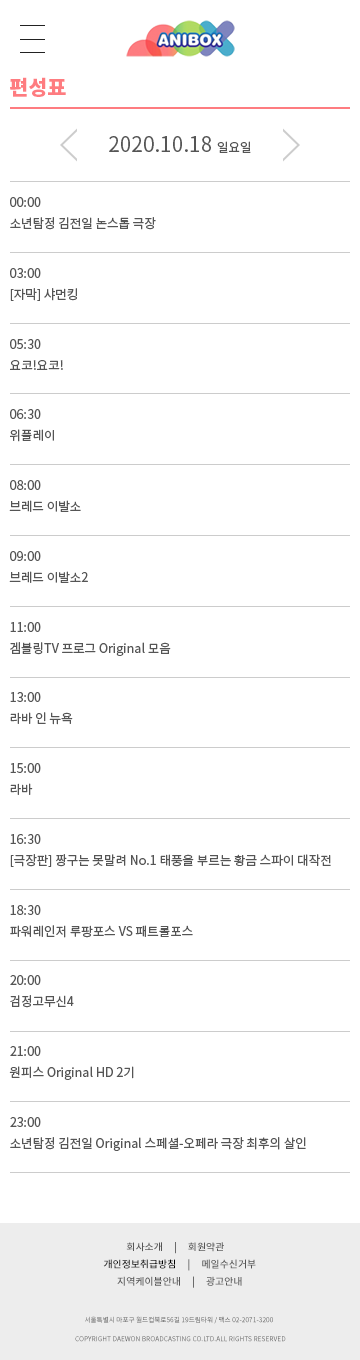
<style>
.page{position:relative;width:360px;height:1360px;background:#ffffff}
.page>*{position:absolute;margin:0}
.t1{font:20.8px "NotoSansKR-Black";color:#fe7c80}
.t2{font:20.8px "NotoSansKR-Regular";color:#555555}
.t3{font:12.5px "NotoSansKR-Regular";color:#555555}
.t4{font:9.9px/17.2px "NotoSansKR-Medium";color:#555555}
.t5{font:9.9px/17.2px "NotoSansKR-Medium";color:#222222}
.t6{font:9.9px/17.2px "NotoSansKR-Medium";color:#000000}
.t7{font:6.6px/19px "NotoSansKR-Regular"}
</style>
<div class="page">
<p class="t1" style="left:10px;top:77px;width:56px;height:20px">편성표</p>
<p class="t2" style="left:109px;top:136px;width:142px;height:17px">2020.10.18 <span class="t3">일요일</span></p>
<p class="t3" style="left:10px;top:197px;width:31px;height:10px">00:00</p>
<p class="t3" style="left:10px;top:217px;width:146px;height:13px">소년탐정 김전일 논스톱 극장</p>
<p class="t3" style="left:10px;top:268px;width:31px;height:10px">03:00</p>
<p class="t3" style="left:10px;top:288px;width:67px;height:13px">[자막] 샤먼킹</p>
<p class="t3" style="left:10px;top:339px;width:31px;height:10px">05:30</p>
<p class="t3" style="left:10px;top:360px;width:53px;height:10px">요코!요코!</p>
<p class="t3" style="left:10px;top:409px;width:31px;height:10px">06:30</p>
<p class="t3" style="left:10px;top:429px;width:44px;height:13px">위플레이</p>
<p class="t3" style="left:10px;top:480px;width:31px;height:10px">08:00</p>
<p class="t3" style="left:9px;top:500px;width:72px;height:12px">브레드 이발소</p>
<p class="t3" style="left:10px;top:551px;width:31px;height:10px">09:00</p>
<p class="t3" style="left:9px;top:571px;width:79px;height:12px">브레드 이발소2</p>
<p class="t3" style="left:10px;top:622px;width:31px;height:10px">11:00</p>
<p class="t3" style="left:10px;top:642px;width:161px;height:14px">겜블링TV 프로그 Original 모음</p>
<p class="t3" style="left:10px;top:692px;width:31px;height:10px">13:00</p>
<p class="t3" style="left:10px;top:712px;width:63px;height:13px">라바 인 뉴욕</p>
<p class="t3" style="left:10px;top:763px;width:31px;height:10px">15:00</p>
<p class="t3" style="left:10px;top:783px;width:23px;height:12px">라바</p>
<p class="t3" style="left:10px;top:834px;width:31px;height:10px">16:30</p>
<p class="t3" style="left:10px;top:854px;width:321px;height:13px">[극장판] 짱구는 못말려 No.1 태풍을 부르는 황금 스파이 대작전</p>
<p class="t3" style="left:10px;top:905px;width:31px;height:10px">18:30</p>
<p class="t3" style="left:10px;top:925px;width:183px;height:13px">파워레인저 루팡포스 VS 패트롤포스</p>
<p class="t3" style="left:10px;top:975px;width:31px;height:10px">20:00</p>
<p class="t3" style="left:10px;top:995px;width:64px;height:13px">검정고무신4</p>
<p class="t3" style="left:10px;top:1046px;width:31px;height:10px">21:00</p>
<p class="t3" style="left:9px;top:1066px;width:125px;height:14px">원피스 Original HD 2기</p>
<p class="t3" style="left:10px;top:1117px;width:31px;height:10px">23:00</p>
<p class="t3" style="left:10px;top:1137px;width:296px;height:14px">소년탐정 김전일 Original 스페셜-오페라 극장 최후의 살인</p>
<p class="t4" style="left:103px;top:1242px;width:153px;height:46px;text-align:center">회사소개<span class="t5">     |     </span>회원약관     <br><span class="t5">개</span><span class="t6">인정보취급방침</span><span class="t5">     |     </span>메일수신거부<br>지역케이블안내<span class="t5">     |     </span>광고안내</p>
<p class="t7" style="left:75px;top:1316px;width:211px;height:26px;text-align:center">서울특별시 마포구 월드컵북로56길 19드림타워 / 팩스 02-2071-3200  <br>COPYRIGHT DAEWON BROADCASTING CO.LTD.ALL RIGHTS RESERVED</p>
</div>
